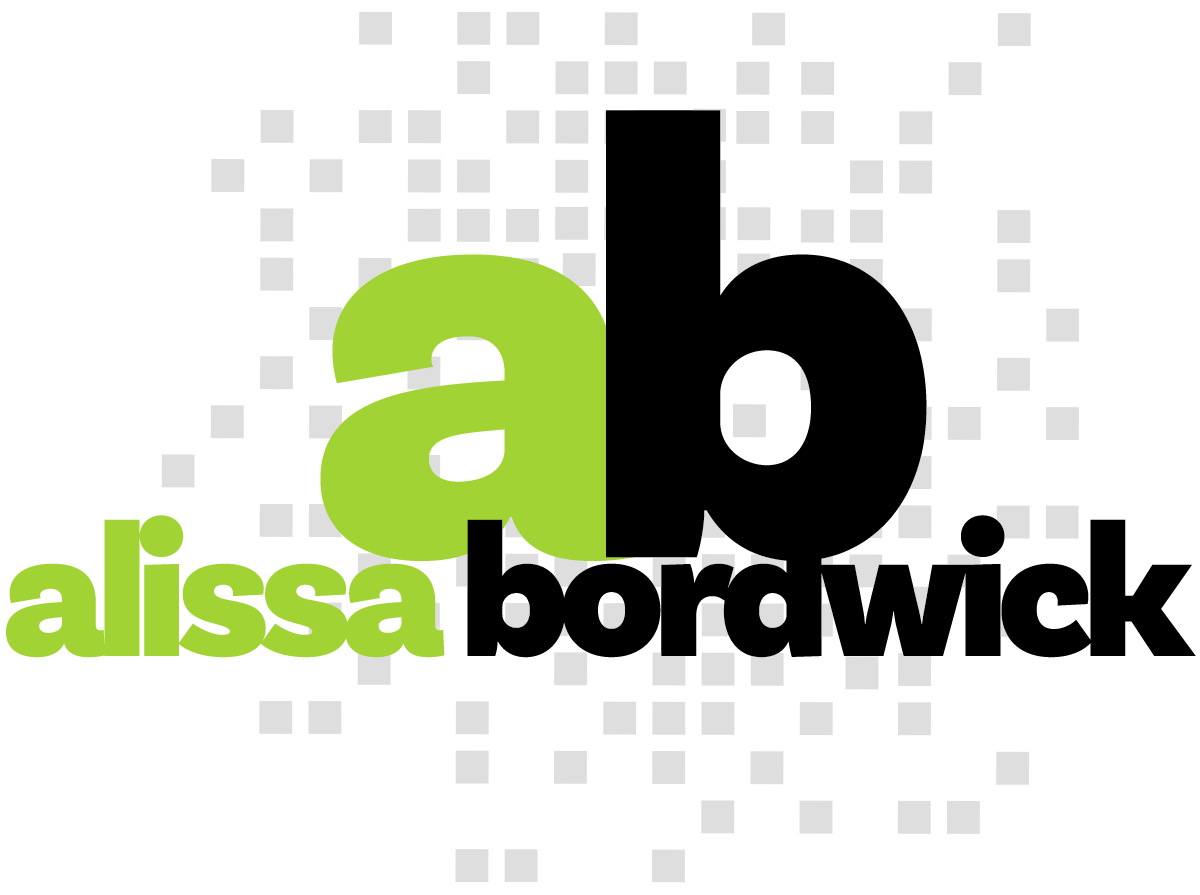
<style>
.page{position:relative;width:1200px;height:895px;background:#ffffff}
.page>*{position:absolute;margin:0}
.t1{font:633.2px "BasicSans-Black";letter-spacing:-0.12em;color:#a2d335}
.t2{font:633.2px "BasicSans-Black";letter-spacing:-0.12em;color:#000000}
.t3{font:192.8px "BasicSans-Black";letter-spacing:-0.06em;color:#000000}
.t4{font:192.8px "BasicSans-Black";letter-spacing:-0.06em;color:#a2d335}
</style>
<div class="page">
<p class="t1" style="left:320px;top:110px;width:607px;height:451px">a<span class="t2">b</span></p>
<p class="t3" style="left:6px;top:515px;width:1190px;height:143px"><span class="t4">alissa </span>bordwick</p>
</div>
